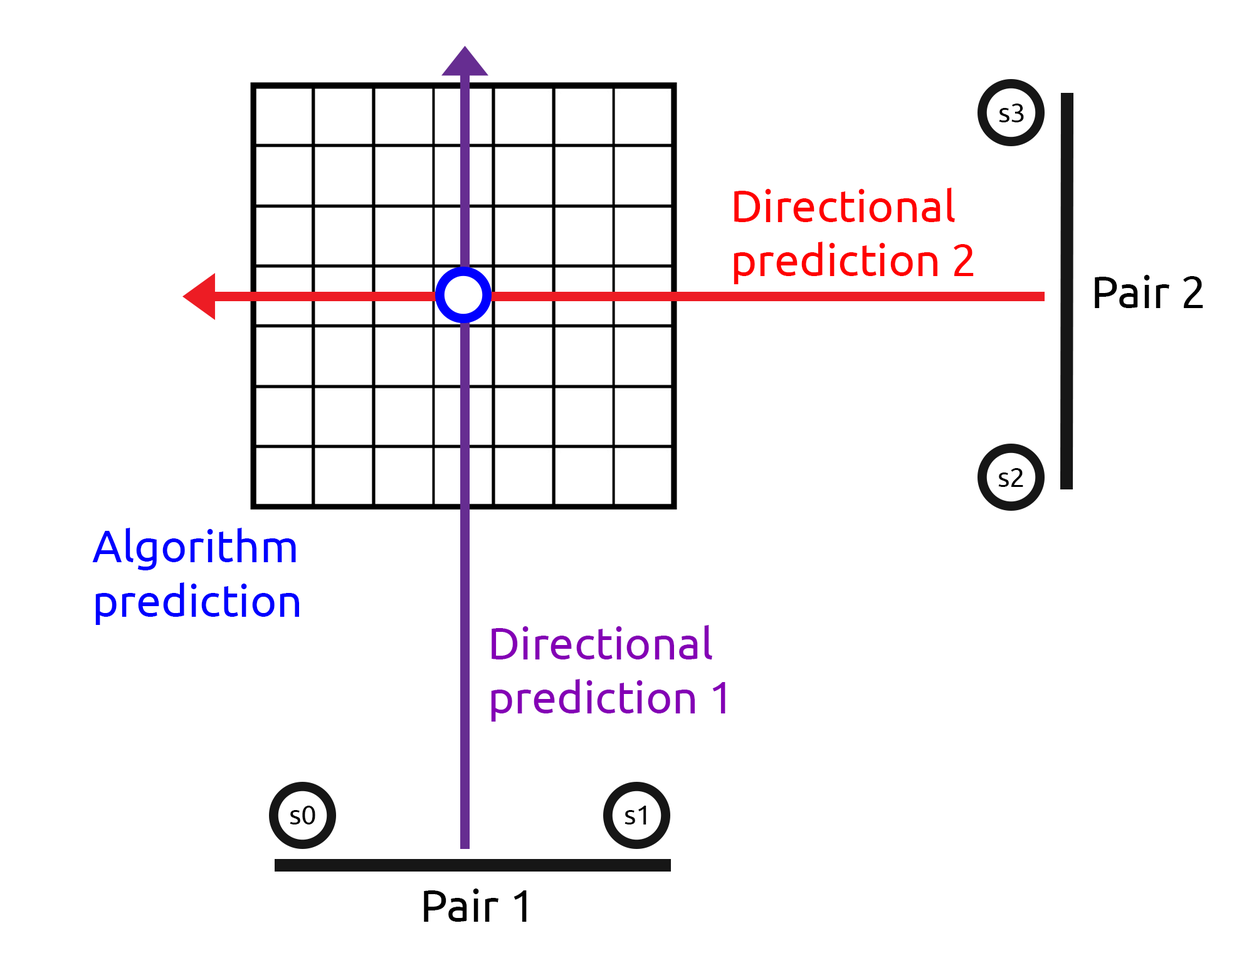
<style>
.page{position:relative;width:1249px;height:955px;background:#ffffff}
.page>*{position:absolute;margin:0}
.t1{font:27.6px "Ubuntu";color:#000000}
.t2{font:45.2px "Ubuntu";color:#ff0000}
.t3{font:45.2px "Ubuntu";color:#000000}
.t4{font:45.2px "Ubuntu";color:#0000ff}
.t5{font:45.2px "Ubuntu";color:#8400b5}
</style>
<div class="page">
<p class="t1" style="left:999px;top:103px;width:25px;height:19px">s3</p>
<p class="t2" style="left:734px;top:188px;width:240px;height:96px">Directional<br>prediction 2</p>
<p class="t3" style="left:1095px;top:275px;width:108px;height:33px">Pair 2</p>
<p class="t1" style="left:998px;top:468px;width:25px;height:19px">s2</p>
<p class="t4" style="left:92px;top:527px;width:207px;height:98px">Algorithm<br>prediction</p>
<p class="t5" style="left:491px;top:625px;width:235px;height:96px">Directional<br>prediction 1</p>
<p class="t1" style="left:290px;top:805px;width:25px;height:19px">s0</p>
<p class="t1" style="left:625px;top:805px;width:22px;height:19px">s1</p>
<p class="t3" style="left:424px;top:888px;width:103px;height:33px">Pair 1</p>
</div>
